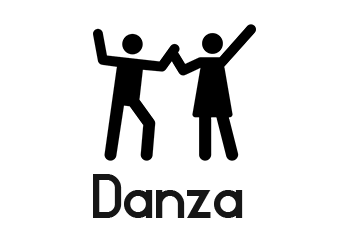
<style>
.page{position:relative;width:345px;height:247px;background:#ffffff}
.page>*{position:absolute;margin:0}
.t1{font:64.4px "ModernSansSerif7";color:#161616}
</style>
<div class="page">
<p class="t1" style="left:93px;top:174px;width:150px;height:44px">Danza</p>
</div>
